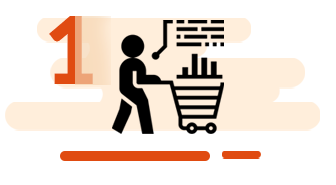
<style>
.page{position:relative;width:336px;height:185px;background:#ffffff}
.page>*{position:absolute;margin:0}
.t1{font:91.7px "Lato-Black";letter-spacing:-0.06em;color:#e04b11}
</style>
<div class="page">
<p class="t1" style="left:49px;top:16px;width:44px;height:68px">1</p>
</div>
